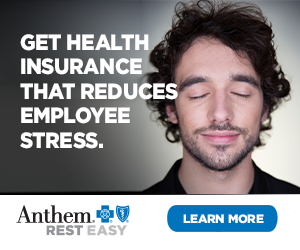
<style>
.page{position:relative;width:300px;height:250px;background:#ffffff}
.page>*{position:absolute;margin:0}
.t1{font:22px/24.6px "Gotham-Black";letter-spacing:-0.02em;color:#ffffff;text-transform:uppercase;scale:0.93 1}
.t2{font:12px "Gotham-Black";letter-spacing:-0.02em;color:#ffffff;text-transform:uppercase}
</style>
<div class="page">
<p class="t1" style="left:20px;top:34px;width:158px;height:115px">get health <br>insurance <br>that reduces <br>employee<br>stress.</p>
<p class="t2" style="left:183px;top:214px;width:81px;height:10px">learn more</p>
</div>
